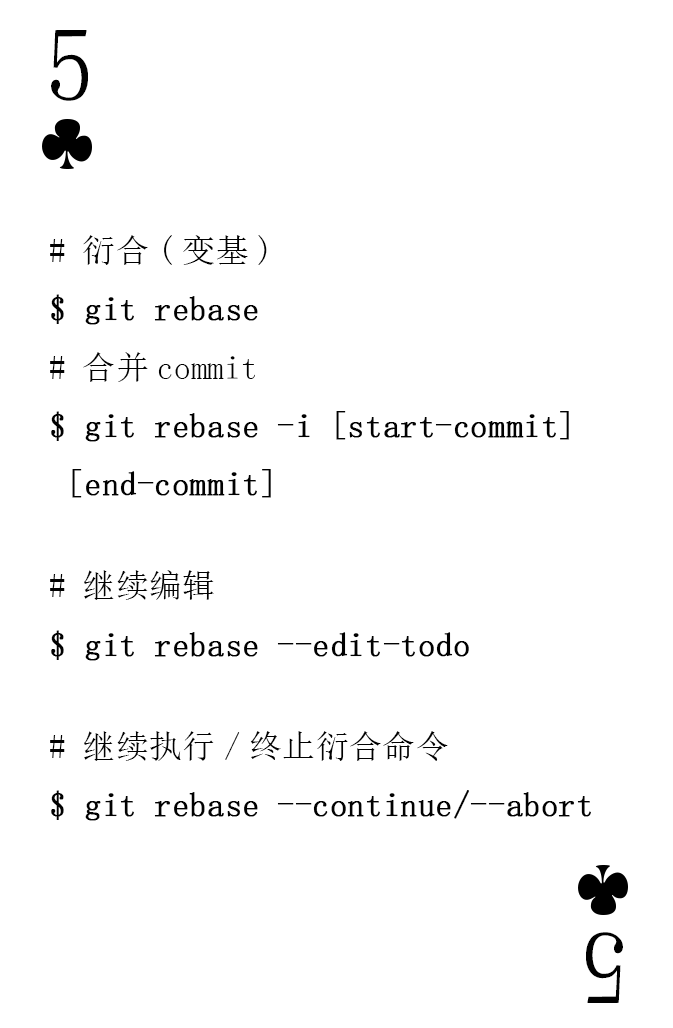
<style>
.page{position:relative;width:673px;height:1028px;background:#ffffff}
.page>*{position:absolute;margin:0}
.t1{font:104.2px "SimSun-ExtB";color:#010101;scale:0.93 1}
.t2{font:33.3px "SimSun";color:#010101;font-weight:bold}
.t3{font:33.3px "SimSun";color:#010101}
</style>
<div class="page">
<p class="t1" style="left:51px;top:30px;width:37px;height:71px">5</p>
<p class="t2" style="left:50px;top:235px;width:541px;height:586px"><span class="t3"># 衍合(变基)<br></span>$ git rebase<br><span class="t3"># 合并commit<br></span>$ git rebase -i [start-commit]<br> [end-commit]<br> <br><span class="t3"># 继续编辑<br></span>$ git rebase --edit-todo<br> <br><span class="t3"># 继续执行/终止衍合命令<br></span>$ git rebase --continue/--abort</p>
<p class="t1" style="left:586px;top:932px;width:37px;height:71px;rotate:180deg">5</p>
</div>
